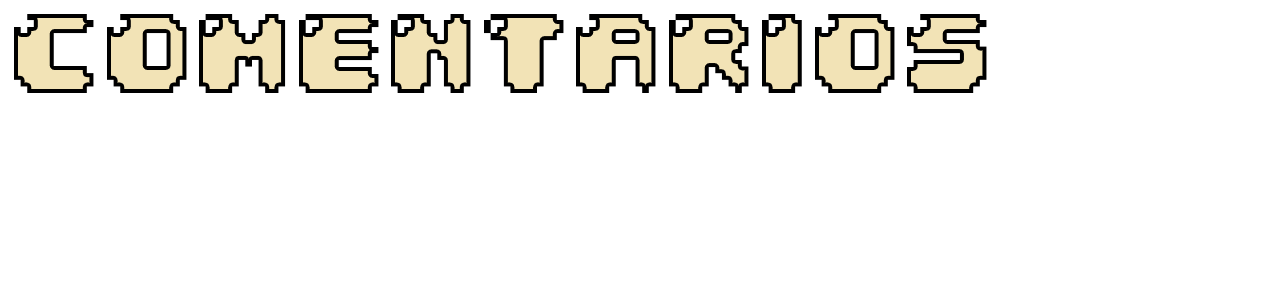
<style>
.page{position:relative;width:1282px;height:290px;background:#ffffff}
.page>*{position:absolute;margin:0}
.t1{font:112.5px "04b30";color:#f2e3b6}
</style>
<div class="page">
<p class="t1" style="left:14px;top:14px;width:973px;height:79px">comentarios</p>
</div>
